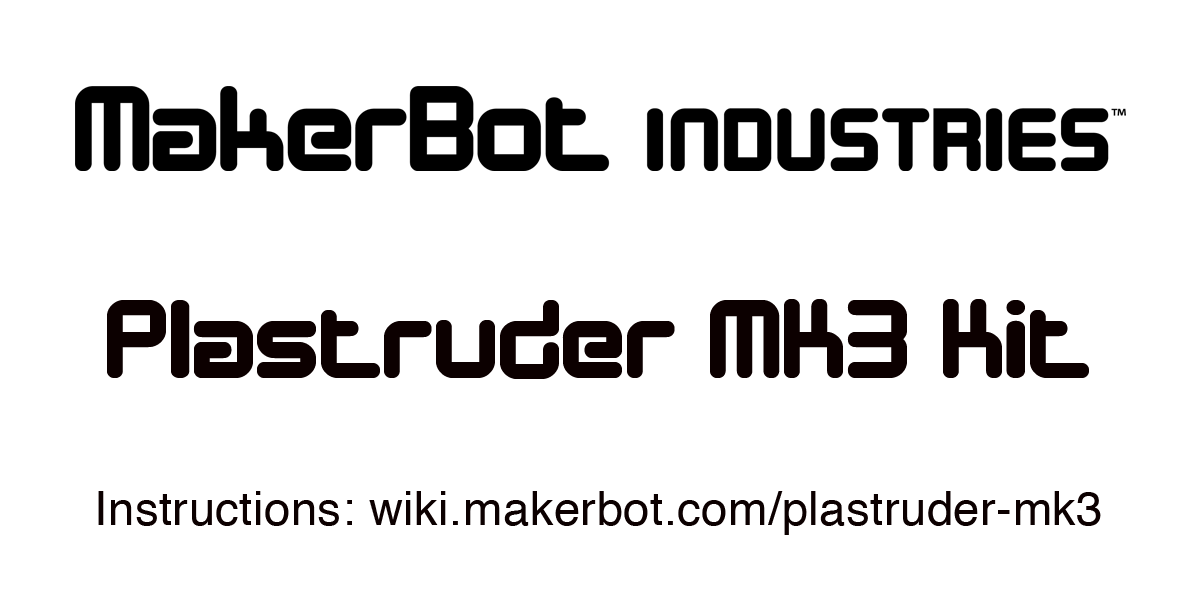
<style>
.page{position:relative;width:1200px;height:600px;background:#ffffff}
.page>*{position:absolute;margin:0}
.t1{font:114.5px "DesignerBlock";letter-spacing:0.01em;color:#0c0000}
.t2{font:47.2px "Helvetica";letter-spacing:0.01em;color:#0c0000}
</style>
<div class="page">
<p class="t1" style="left:107px;top:299px;width:982px;height:80px">Plastruder MK3 Kit</p>
<p class="t2" style="left:98px;top:491px;width:1003px;height:44px">Instructions: wiki.makerbot.com/plastruder-mk3</p>
</div>
